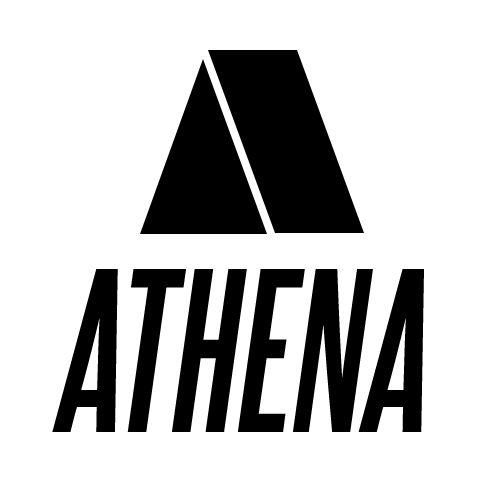
<style>
.page{position:relative;width:500px;height:500px;background:#ffffff}
.page>*{position:absolute;margin:0}
.t1{font:198px "SteelfishRg-BoldItalic";color:#000000}
</style>
<div class="page">
<p class="t1" style="left:52px;top:269px;width:372px;height:163px">ATHENA</p>
</div>
